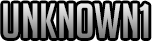
<style>
.page{position:relative;width:152px;height:41px;background:#000000}
.page>*{position:absolute;margin:0}
.t1{font:48px "BigNoodleTitling"}
</style>
<div class="page">
<p class="t1" style="left:3px;top:3px;width:146px;height:35px">unknown1</p>
</div>
